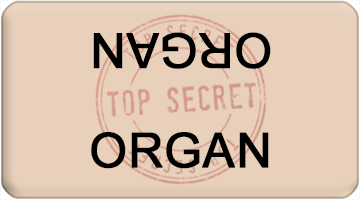
<style>
.page{position:relative;width:360px;height:200px;background:#e8d0bb}
.page>*{position:absolute;margin:0}
.t1{font:48px "ArialMT";color:#000000;font-weight:bold}
</style>
<div class="page">
<p class="t1" style="left:93px;top:32px;width:178px;height:37px;rotate:180deg">ORGAN</p>
<p class="t1" style="left:91px;top:132px;width:178px;height:37px">ORGAN</p>
</div>
